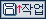
<style>
.page{position:relative;width:46px;height:19px;background:#d8dee3}
.page>*{position:absolute;margin:0}
.t1{font:12px "GulimChe";color:#0e2747}
</style>
<div class="page">
<p class="t1" style="left:22px;top:4px;width:21px;height:11px">작업</p>
</div>
